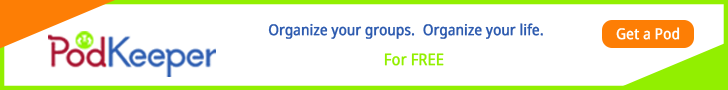
<style>
.page{position:relative;width:728px;height:90px;background:#ffffff}
.page>*{position:absolute;margin:0}
.t1{font:15px "NotoSans";color:#2e5baf;font-weight:bold;scale:0.88 1}
.t2{font:15.1px "NotoSans";color:#feffff;font-weight:bold;scale:0.88 1}
.t3{font:16px "NotoSans";color:#92ef00;font-weight:bold;scale:0.88 1}
</style>
<div class="page">
<p class="t1" style="left:268px;top:23px;width:147px;height:16px">Organize your groups.</p>
<p class="t1" style="left:423px;top:23px;width:120px;height:16px">Organize your life.</p>
<p class="t2" style="left:616px;top:27px;width:64px;height:13px">Get a Pod</p>
<p class="t3" style="left:384px;top:53px;width:60px;height:13px">For FREE</p>
</div>
